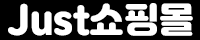
<style>
.page{position:relative;width:200px;height:40px;background:#000000}
.page>*{position:absolute;margin:0}
.t1{font:34.8px "Jalnan2TTF";color:#ffffff}
</style>
<div class="page">
<p class="t1" style="left:8px;top:3px;width:185px;height:33px">Just쇼핑몰</p>
</div>
